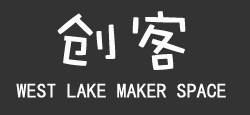
<style>
.page{position:relative;width:250px;height:115px;background:#333333}
.page>*{position:absolute;margin:0}
.t1{font:72px "DFWaWaSC-W5";color:#fdfcfc}
.t2{font:20px "SimHei";color:#fefdfd}
</style>
<div class="page">
<p class="t1" style="left:57px;top:11px;width:129px;height:59px">创客</p>
<p class="t2" style="left:16px;top:83px;width:210px;height:15px">WEST LAKE MAKER SPACE</p>
</div>
